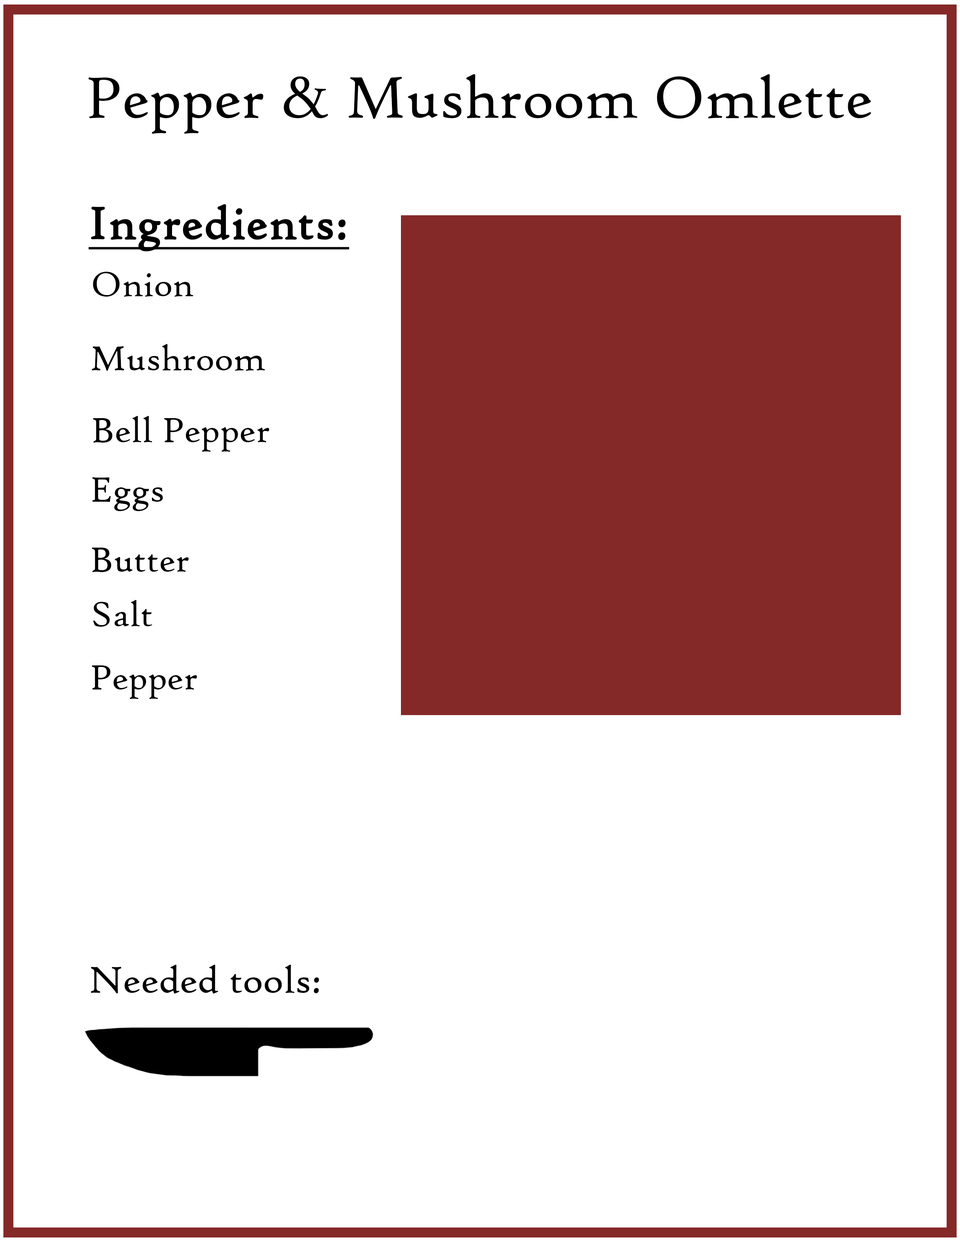
<style>
.page{position:relative;width:960px;height:1242px;background:#ffffff}
.page>*{position:absolute;margin:0}
.t1{font:62.7px "HighTowerText-Reg";color:#000000}
.t2{font:48.6px "HighTowerText-Reg";color:#000000;font-weight:bold;text-decoration:underline}
.t3{font:37.6px "HighTowerText-Reg";color:#000000}
.t4{font:40.8px "HighTowerText-Reg";color:#000000}
</style>
<div class="page">
<p class="t1" style="left:88px;top:74px;width:783px;height:60px">Pepper &amp; Mushroom Omlette</p>
<p class="t2" style="left:88px;top:204px;width:261px;height:47px">Ingredients:</p>
<p class="t3" style="left:93px;top:272px;width:100px;height:25px">Onion</p>
<p class="t3" style="left:91px;top:344px;width:174px;height:27px">Mushroom</p>
<p class="t3" style="left:93px;top:416px;width:176px;height:36px">Bell Pepper</p>
<p class="t3" style="left:92px;top:477px;width:71px;height:34px">Eggs</p>
<p class="t3" style="left:92px;top:548px;width:97px;height:24px">Butter</p>
<p class="t3" style="left:93px;top:600px;width:59px;height:27px">Salt</p>
<p class="t3" style="left:92px;top:666px;width:105px;height:33px">Pepper</p>
<p class="t4" style="left:91px;top:965px;width:228px;height:29px">Needed tools:</p>
</div>
